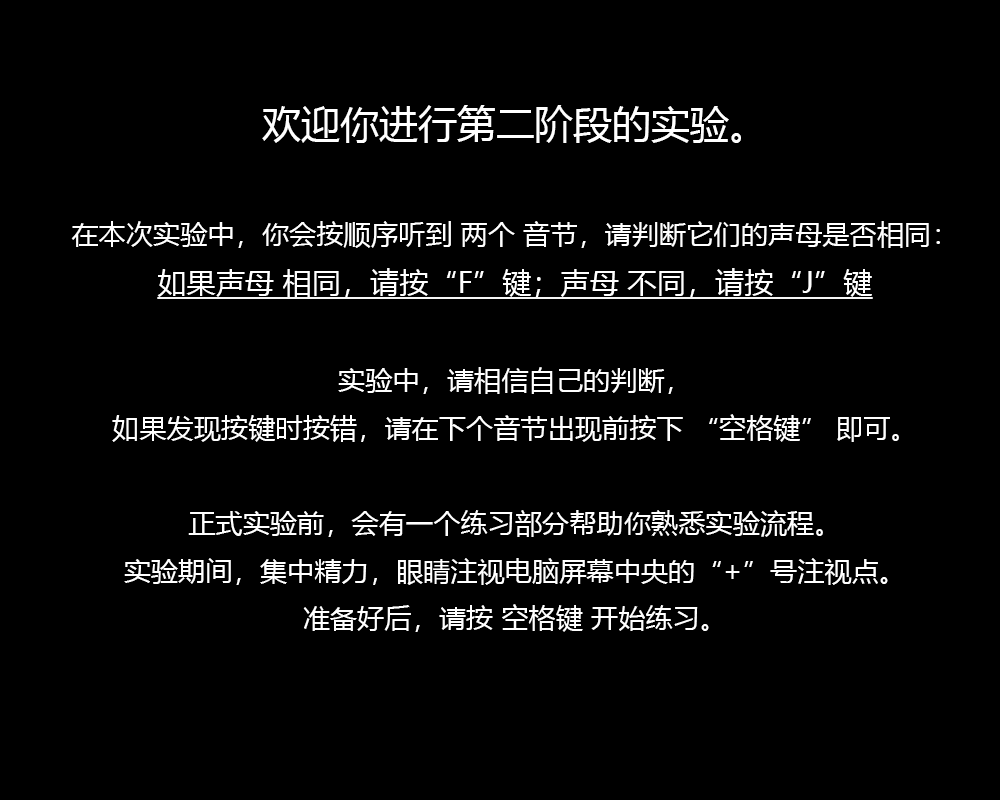
<style>
.page{position:relative;width:1000px;height:800px;background:#000000}
.page>*{position:absolute;margin:0}
.t1{font:27.2px "MicrosoftYaHei";color:#ffffff}
.t2{font:38.9px "MicrosoftYaHei";color:#ffffff}
.t3{font:29.2px "MicrosoftYaHei";color:#ffffff;text-decoration:underline}
</style>
<div class="page">
<p class="t1" style="left:71px;top:105px;width:869px;height:527px;text-align:center"><span class="t2">欢迎你进行第二阶段的实验。<br></span><br>在本次实验中，你会按顺序听到 两个 音节，请判断它们的声母是否相同：<br><span class="t3">如果声母 相同，请按“F”键；声母 不同，请按“J”键<br></span><br>实验中，请相信自己的判断，<br>如果发现按键时按错，请在下个音节出现前按下 “空格键” 即可。<br><br>正式实验前，会有一个练习部分帮助你熟悉实验流程。<br>实验期间，集中精力，眼睛注视电脑屏幕中央的“+”号注视点。<br>准备好后，请按 空格键 开始练习。</p>
</div>
